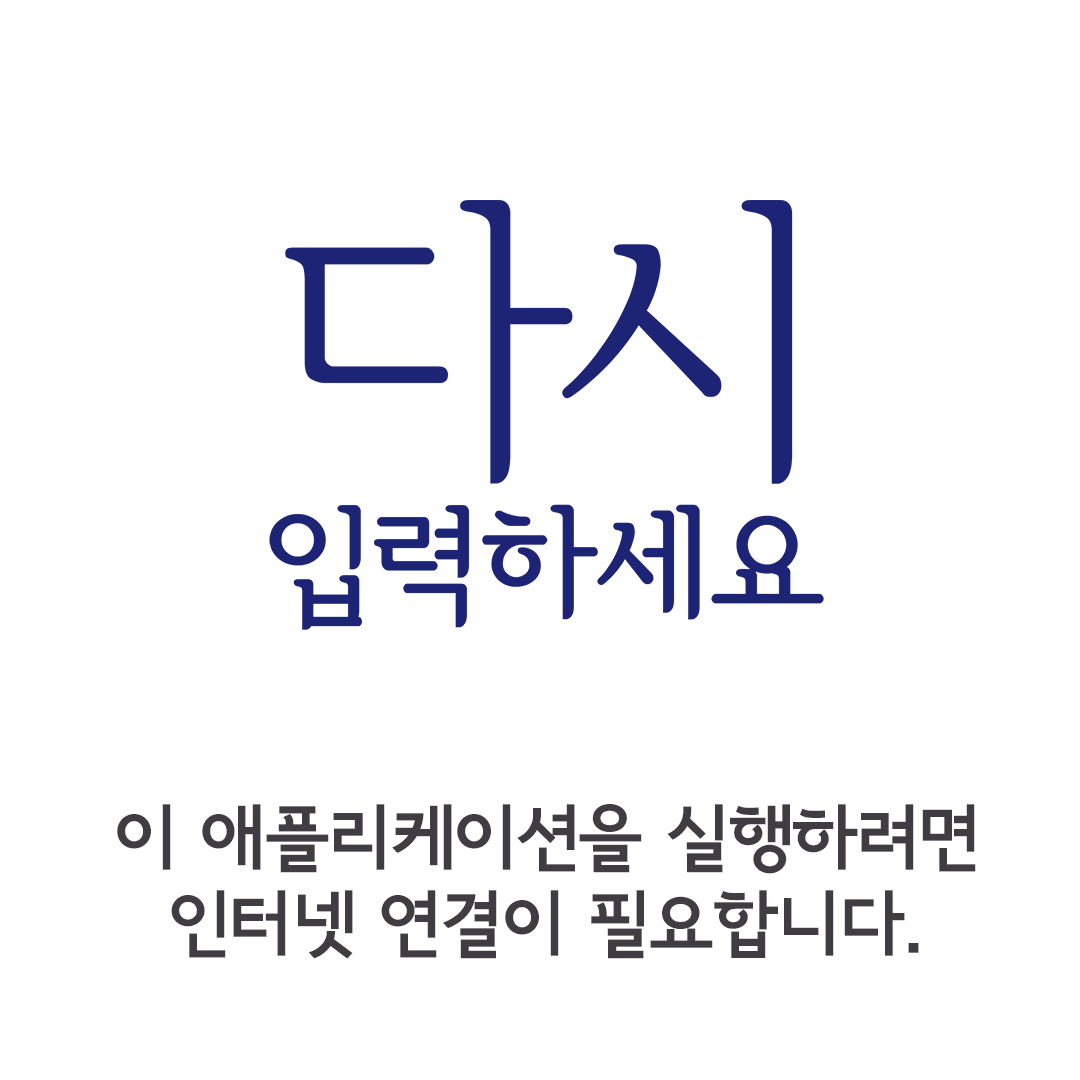
<style>
.page{position:relative;width:1080px;height:1080px;background:#ffffff}
.page>*{position:absolute;margin:0}
.t1{font:72px "SeoulNamsanEB";color:#3f3d42}
</style>
<div class="page">
<p class="t1" style="left:117px;top:804px;width:859px;height:155px;text-align:center">이 애플리케이션을 실행하려면<br>인터넷 연결이 필요합니다.</p>
</div>
